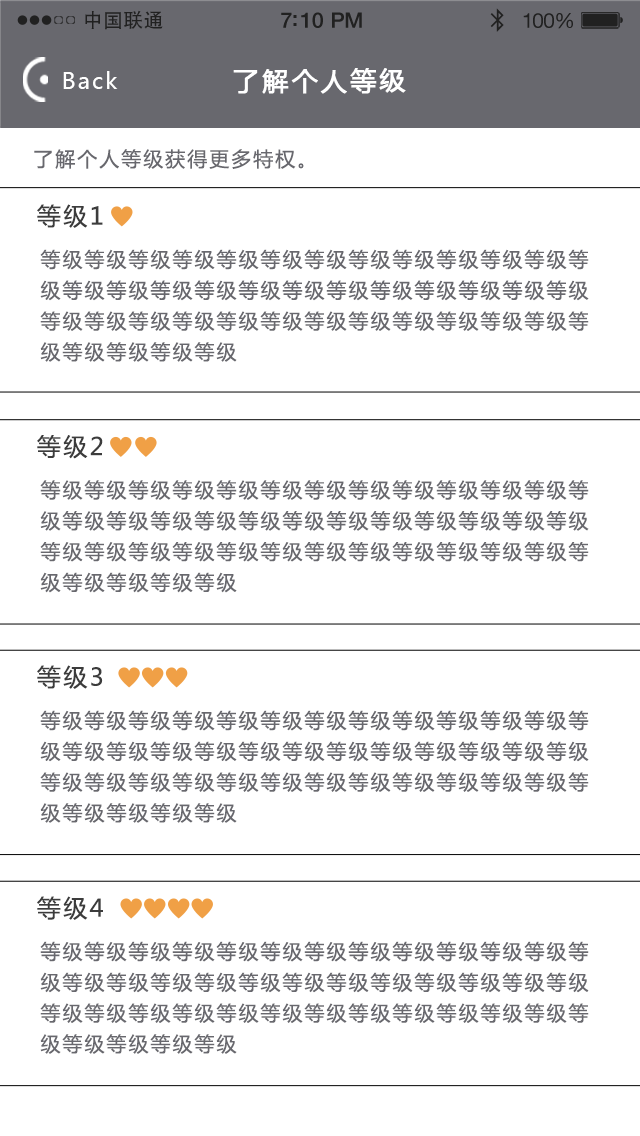
<style>
.page{position:relative;width:640px;height:1136px;background:#ffffff}
.page>*{position:absolute;margin:0}
.t1{font:19.7px "AdobeHeitiStd-Regular";letter-spacing:0.02em;color:#212121}
.t2{font:21.4px "HelveticaNeue-Medium";letter-spacing:-0.02em;color:#212121}
.t3{font:20.6px "HelveticaNeue";letter-spacing:-0.02em;color:#212121}
.t4{font:22px "MicrosoftYaHei";letter-spacing:0.1em;color:#ffffff}
.t5{font:26px "MicrosoftYaHei";letter-spacing:0.1em;color:#ffffff;font-weight:bold}
.t6{font:20px "MicrosoftYaHei";letter-spacing:0.1em;color:#68686e}
.t7{font:24px "MicrosoftYaHei";letter-spacing:0.1em;color:#3c3c3c}
.t8{font:20px/30.8px "MicrosoftYaHei";letter-spacing:0.1em;color:#68686e}
</style>
<div class="page">
<p class="t1" style="left:85px;top:10px;width:78px;height:20px">中国联通</p>
<p class="t2" style="left:281px;top:12px;width:81px;height:16px">7:10 PM</p>
<p class="t3" style="left:523px;top:13px;width:50px;height:16px">100%</p>
<p class="t4" style="left:63px;top:71px;width:55px;height:18px">Back</p>
<p class="t5" style="left:233px;top:68px;width:173px;height:26px">了解个人等级</p>
<p class="t6" style="left:34px;top:149px;width:270px;height:20px">了解个人等级获得更多特权。</p>
<p class="t7" style="left:37px;top:204px;width:66px;height:24px">等级1</p>
<p class="t8" style="left:40px;top:249px;width:549px;height:113px">等级等级等级等级等级等级等级等级等级等级等级等级等<br>级等级等级等级等级等级等级等级等级等级等级等级等级<br>等级等级等级等级等级等级等级等级等级等级等级等级等<br>级等级等级等级等级</p>
<p class="t7" style="left:37px;top:435px;width:66px;height:24px">等级2</p>
<p class="t8" style="left:40px;top:480px;width:549px;height:113px">等级等级等级等级等级等级等级等级等级等级等级等级等<br>级等级等级等级等级等级等级等级等级等级等级等级等级<br>等级等级等级等级等级等级等级等级等级等级等级等级等<br>级等级等级等级等级</p>
<p class="t7" style="left:37px;top:665px;width:66px;height:24px">等级3</p>
<p class="t8" style="left:40px;top:710px;width:549px;height:113px">等级等级等级等级等级等级等级等级等级等级等级等级等<br>级等级等级等级等级等级等级等级等级等级等级等级等级<br>等级等级等级等级等级等级等级等级等级等级等级等级等<br>级等级等级等级等级</p>
<p class="t7" style="left:37px;top:896px;width:66px;height:24px">等级4</p>
<p class="t8" style="left:40px;top:941px;width:549px;height:113px">等级等级等级等级等级等级等级等级等级等级等级等级等<br>级等级等级等级等级等级等级等级等级等级等级等级等级<br>等级等级等级等级等级等级等级等级等级等级等级等级等<br>级等级等级等级等级</p>
</div>
